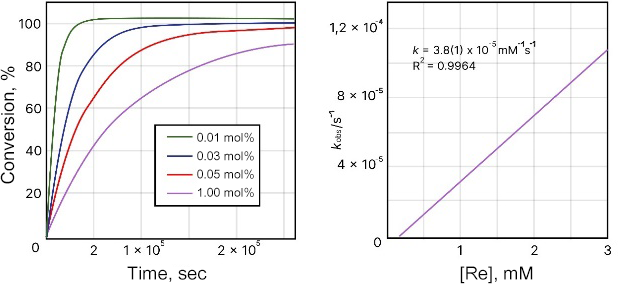
<style>
.page{position:relative;width:618px;height:284px;background:#ffffff}
.page>*{position:absolute;margin:0}
.t1{font:18.3px "ArialUnicodeMS";color:#000000}
.t2{font:12.2px "ArialUnicodeMS";color:#000000}
</style>
<div class="page">
<p class="t1" style="left:0px;top:66px;width:17px;height:118px;rotate:-90deg">Conversion, %</p>
<p class="t2" style="left:197px;top:132px;width:57px;height:65px;text-align:center">0.01 mol%<br>0.03 mol%<br>0.05 mol%<br>1.00 mol%</p>
<p class="t1" style="left:127px;top:266px;width:80px;height:16px">Time, sec</p>
<p class="t1" style="left:460px;top:266px;width:73px;height:18px">[Re], mM</p>
</div>
